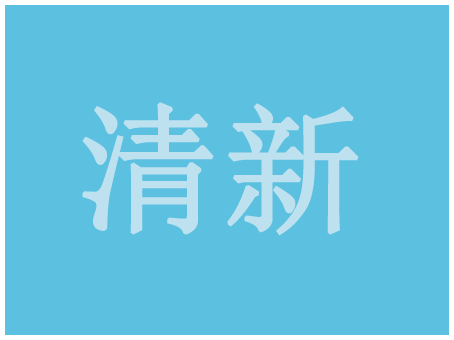
<style>
.page{position:relative;width:454px;height:340px;background:#5cc0e0}
.page>*{position:absolute;margin:0}
.t1{font:140px "SimSun";color:#bde1ef;font-weight:bold}
</style>
<div class="page">
<p class="t1" style="left:82px;top:102px;width:277px;height:134px">清新</p>
</div>
